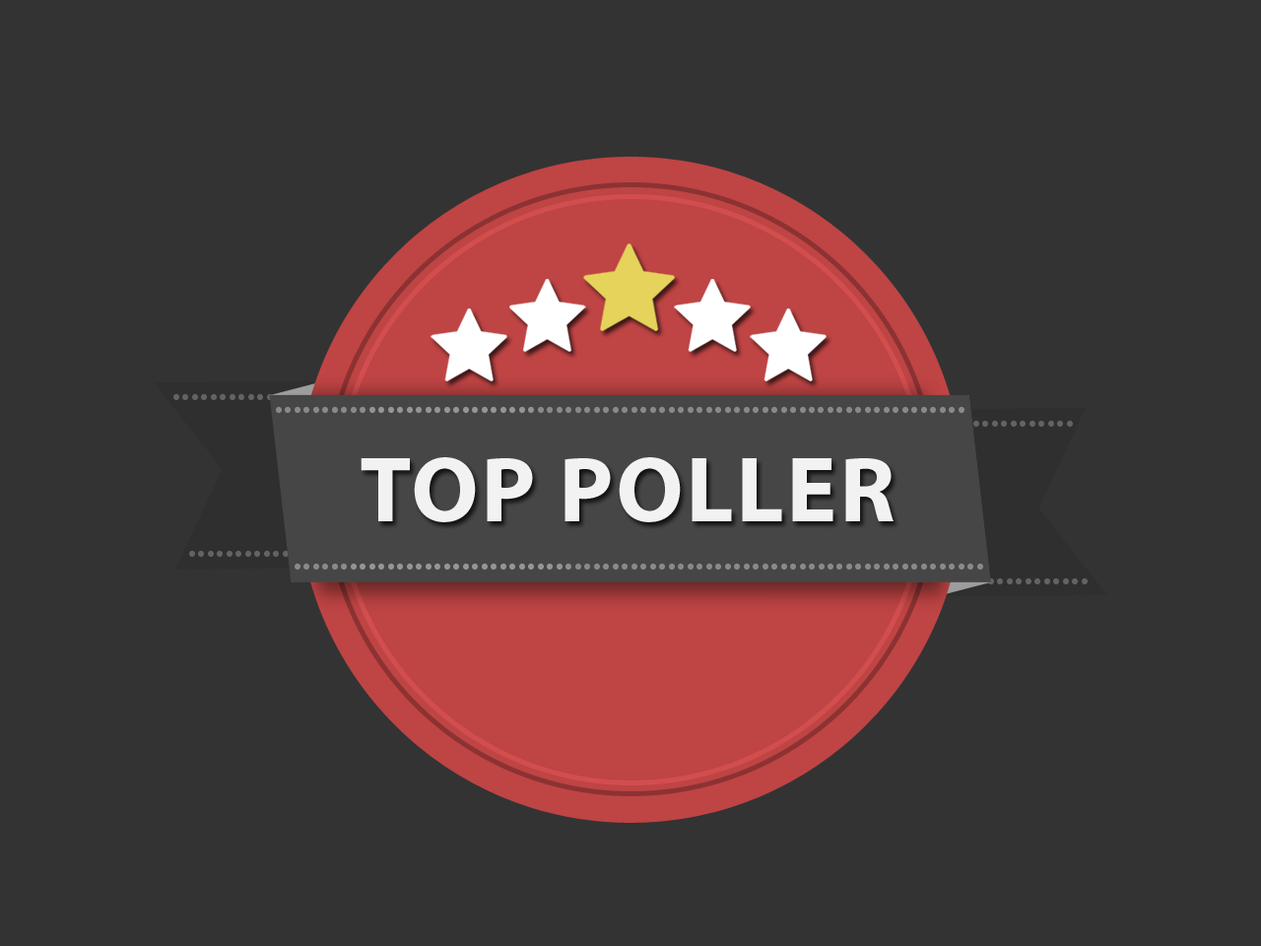
<style>
.page{position:relative;width:1261px;height:946px;background:#333333}
.page>*{position:absolute;margin:0}
.t1{font:94.2px "MyriadPro-Bold";letter-spacing:0.025em;color:#f2f2f2;text-transform:uppercase}
</style>
<div class="page">
<p class="t1" style="left:361px;top:457px;width:532px;height:65px">TOP POLLER</p>
</div>
